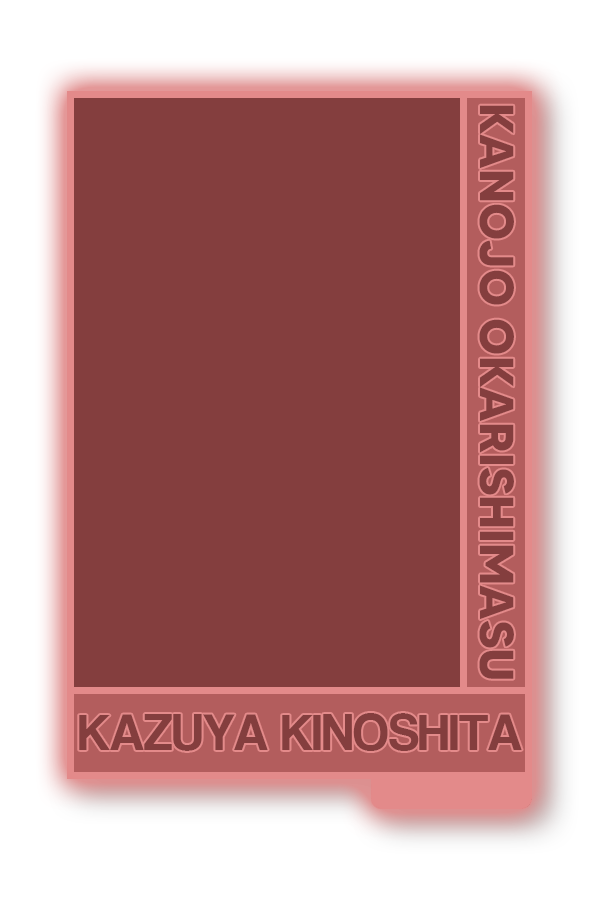
<style>
.page{position:relative;width:600px;height:900px;background:#843e3e}
.page>*{position:absolute;margin:0}
.t1{font:47.6px "MADETOMMY-Bold";color:#843e3e}
.t2{font:52.6px "CoolveticaRg-Regular";color:#843e3e}
</style>
<div class="page">
<p class="t1" style="left:479px;top:105px;width:35px;height:574px;rotate:90deg">KANOJO OKARISHIMASU</p>
<p class="t2" style="left:79px;top:713px;width:443px;height:38px">KAZUYA KINOSHITA</p>
</div>
